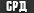
<style>
.page{position:relative;width:34px;height:13px}
.page>*{position:absolute;margin:0}
.t1{font:13.9px "NK_04";color:#ffffff}
</style>
<div class="page">
<p class="t1" style="left:6px;top:1px;width:21px;height:11px">СРД</p>
</div>
